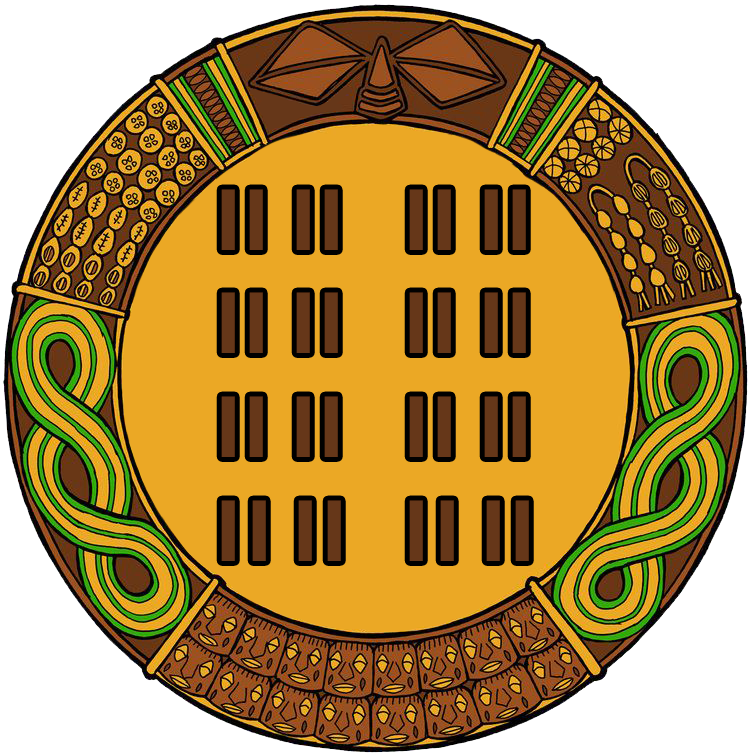
<style>
.page{position:relative;width:750px;height:756px;background:#eba825}
.page>*{position:absolute;margin:0}
.t1{font:86.5px "TTNorms-Bold";color:#663719}
</style>
<div class="page">
<p class="t1" style="left:221px;top:189px;width:120px;height:372px">II II<br>II II<br>II II<br>I I II</p>
<p class="t1" style="left:409px;top:189px;width:120px;height:372px">II II<br>II II<br>II II<br>I I II</p>
</div>
